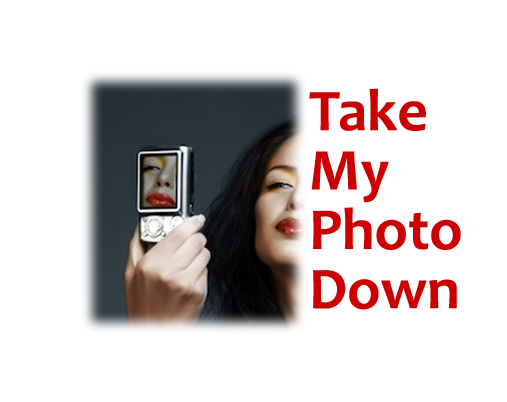
<style>
.page{position:relative;width:507px;height:402px;background:#ffffff}
.page>*{position:absolute;margin:0}
.t1{font:59.4px/59.4px "Candara-Bold";color:#cc0000}
</style>
<div class="page">
<p class="t1" style="left:309px;top:88px;width:152px;height:222px">Take<br>My <br>Photo<br>Down</p>
</div>
